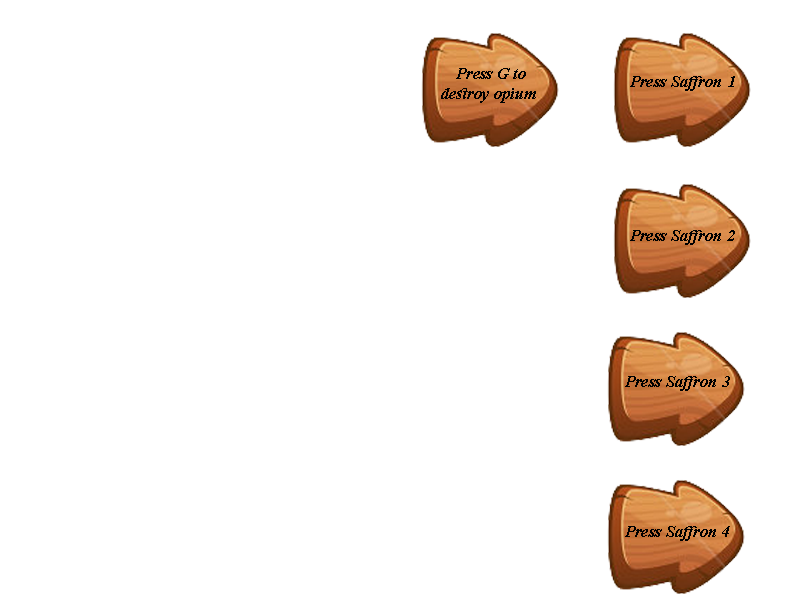
<style>
.page{position:relative;width:800px;height:600px;background:#ffffff}
.page>*{position:absolute;margin:0}
.t1{font:16.7px "TimesNewRomanPS-BoldItalicMT";color:#000000}
</style>
<div class="page">
<p class="t1" style="left:441px;top:68px;width:95px;height:35px;text-align:center">Press G to <br>destroy opium</p>
<p class="t1" style="left:630px;top:76px;width:105px;height:15px">Press Saffron 1</p>
<p class="t1" style="left:630px;top:230px;width:105px;height:15px">Press Saffron 2</p>
<p class="t1" style="left:625px;top:376px;width:105px;height:15px">Press Saffron 3</p>
<p class="t1" style="left:625px;top:526px;width:105px;height:15px">Press Saffron 4</p>
</div>
